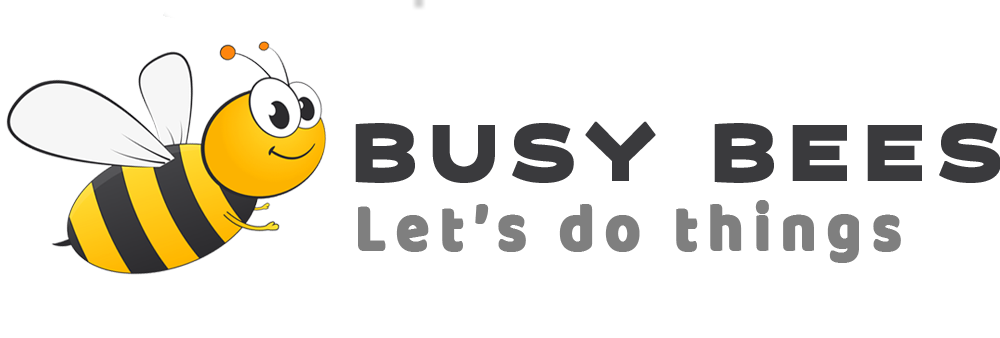
<style>
.page{position:relative;width:1000px;height:338px;background:#ffffff}
.page>*{position:absolute;margin:0}
.t1{font:73.6px "Vortice-Concept";letter-spacing:0.14em;color:#3a3a3d;font-weight:bold;scale:0.87 1}
.t2{font:70.1px "Baloo-Regular";letter-spacing:0.14em;color:#7f7f7f;font-weight:bold;scale:0.87 1}
</style>
<div class="page">
<p class="t1" style="left:355px;top:121px;width:646px;height:62px">BUSY BEES</p>
<p class="t2" style="left:358px;top:200px;width:543px;height:63px">Let’s do things</p>
</div>
